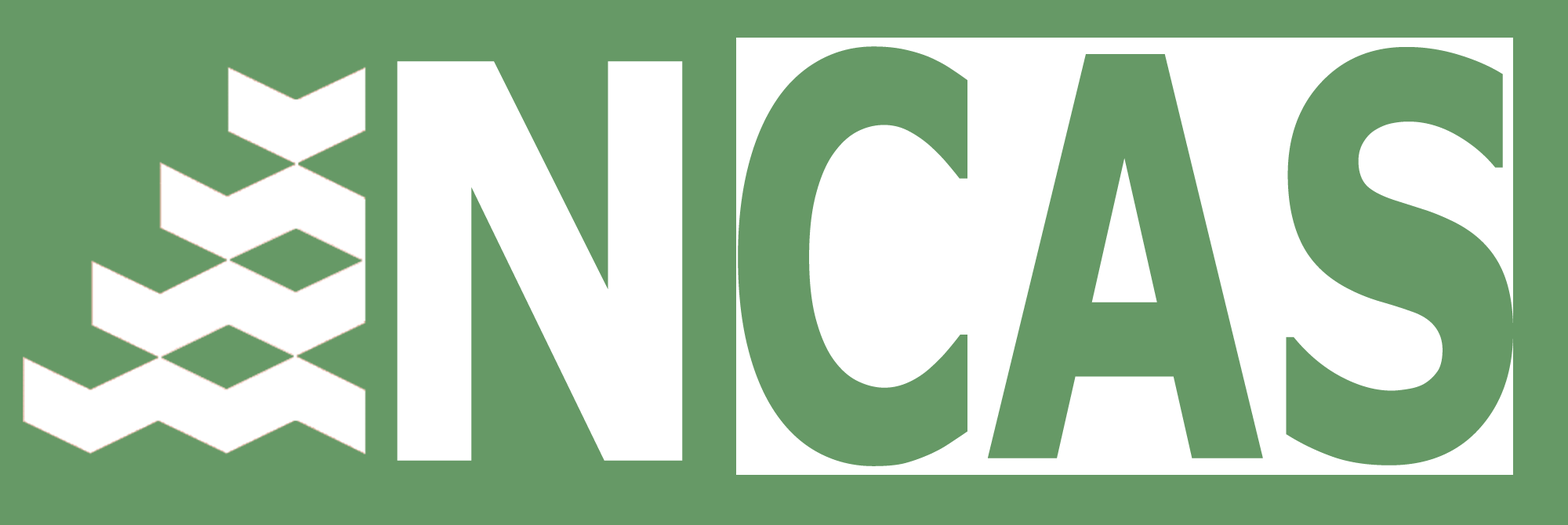
<style>
.page{position:relative;width:1568px;height:525px;background:#669966}
.page>*{position:absolute;margin:0}
.t1{font:555.6px "Verdana-Bold";color:#669966;scale:0.66 1}
.t2{font:548.9px "Verdana-Bold";color:#ffffff;scale:0.78 1}
</style>
<div class="page">
<p class="t1" style="left:738px;top:46px;width:775px;height:420px">CAS</p>
<p class="t2" style="left:397px;top:61px;width:286px;height:400px">N</p>
</div>
